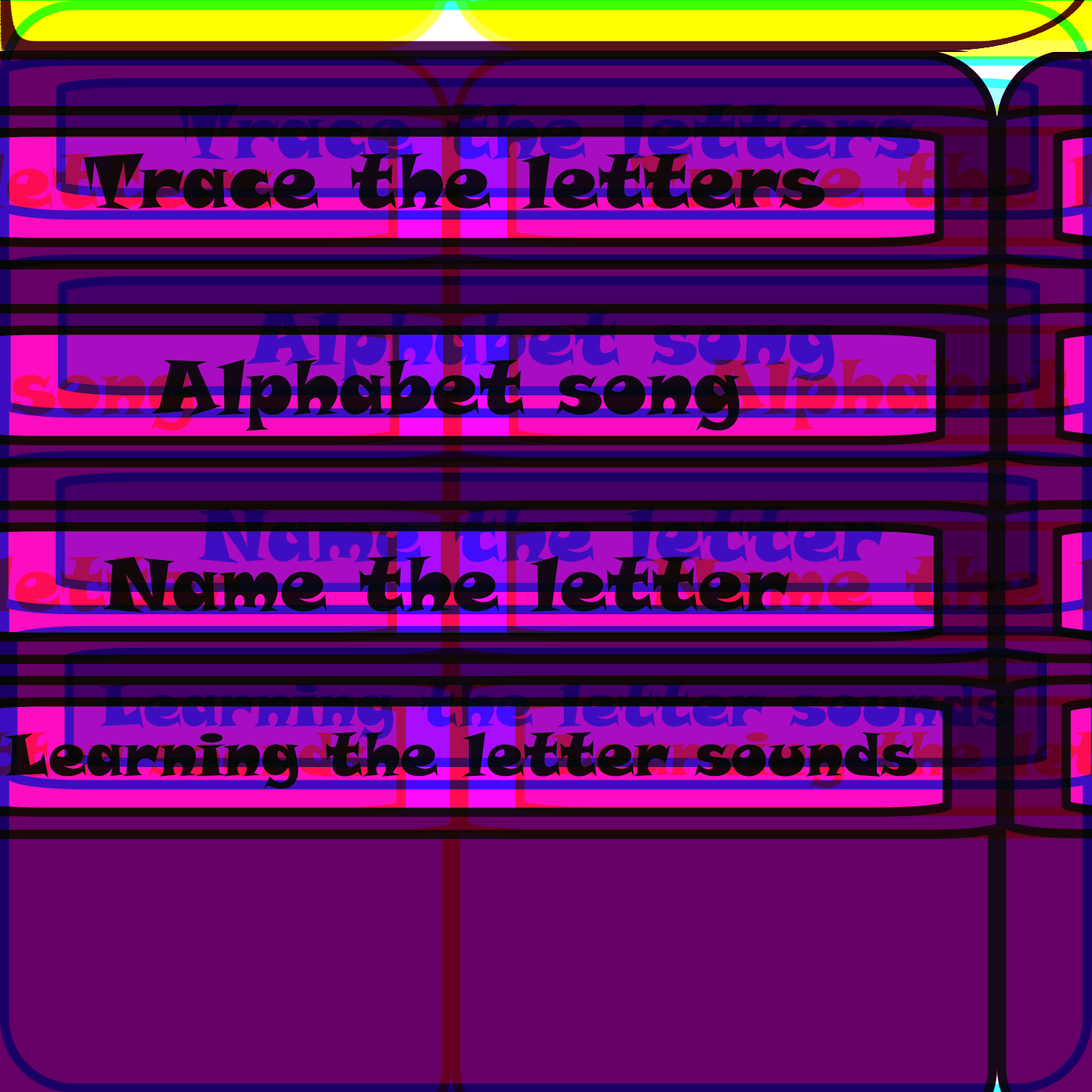
<style>
.page{position:relative;width:1092px;height:1092px;background:#660066}
.page>*{position:absolute;margin:0}
.t1{font:74.2px "SnapITC-Regular"}
.t2{font:44.5px "SnapITC-Regular";scale:2 1}
.t3{font:59.3px "SnapITC-Regular"}
</style>
<div class="page">
<p class="t1" style="left:179px;top:102px;width:741px;height:57px"><span class="t2"><br></span>Trace the letters</p>
<p class="t1" style="left:246px;top:309px;width:589px;height:72px">Alphabet song</p>
<p class="t1" style="left:198px;top:505px;width:687px;height:57px">Name the letter</p>
<p class="t3" style="left:99px;top:681px;width:913px;height:58px">Learning the letter sounds</p>
</div>
